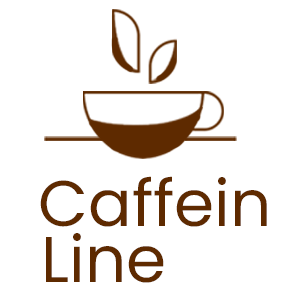
<style>
.page{position:relative;width:300px;height:300px;background:#ffffff}
.page>*{position:absolute;margin:0}
.t1{font:64.4px "Poppins-Regular";color:#5e2a00}
</style>
<div class="page">
<p class="t1" style="left:40px;top:176px;width:227px;height:51px">Caffein</p>
<p class="t1" style="left:46px;top:233px;width:118px;height:50px">Line</p>
</div>
